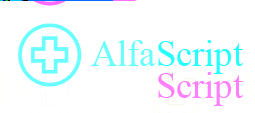
<style>
.page{position:relative;width:255px;height:113px;background:#ffffff}
.page>*{position:absolute;margin:0}
.t1{font:36.6px "MyriadPro-Regular"}
</style>
<div class="page">
<p class="t1" style="left:91px;top:40px;width:153px;height:34px">AlfaScript</p>
</div>
